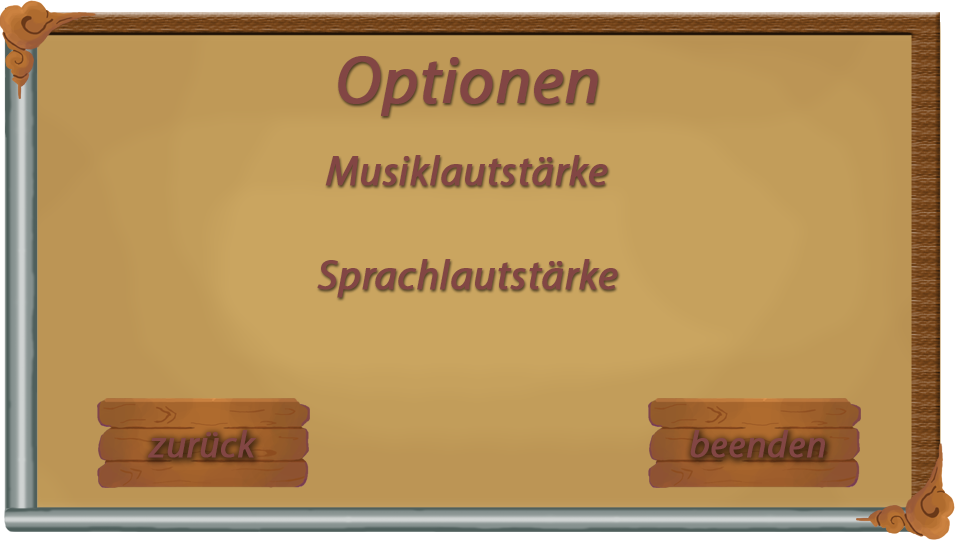
<style>
.page{position:relative;width:960px;height:540px}
.page>*{position:absolute;margin:0}
.t1{font:66.7px "MyriadPro-It";color:#824644;font-weight:bold}
.t2{font:41.7px "MyriadPro-It";color:#824644;font-weight:bold}
.t3{font:37.6px "MyriadPro-It";color:#824644;font-weight:bold}
</style>
<div class="page">
<p class="t1" style="left:338px;top:56px;width:260px;height:60px">Optionen</p>
<p class="t2" style="left:325px;top:155px;width:283px;height:31px">Musiklautstärke</p>
<p class="t2" style="left:317px;top:259px;width:301px;height:39px">Sprachlautstärke</p>
<p class="t3" style="left:148px;top:430px;width:108px;height:28px">zurück</p>
<p class="t3" style="left:690px;top:430px;width:135px;height:28px">beenden</p>
</div>
